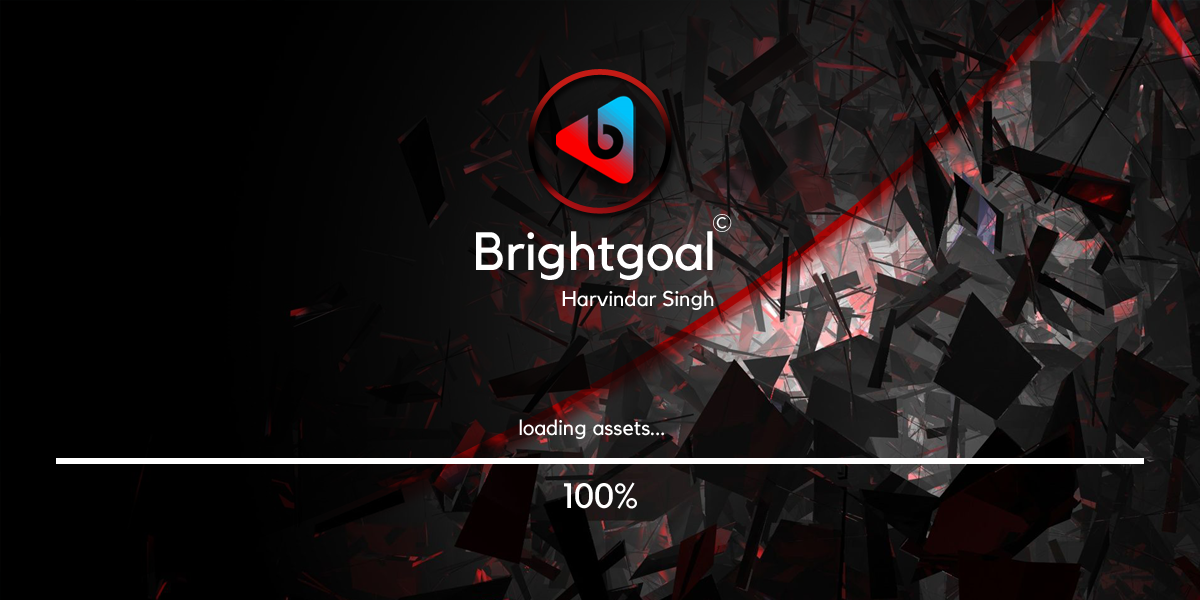
<style>
.page{position:relative;width:1200px;height:600px;background:#000000}
.page>*{position:absolute;margin:0}
.t1{font:15.4px "Kollektif";color:#ffffff}
.t2{font:53.3px "Kollektif";color:#ffffff}
.t3{font:21.3px "Kollektif";color:#ffffff}
.t4{font:34.7px "Kollektif";color:#ffffff}
</style>
<div class="page">
<p class="t1" style="left:716px;top:217px;width:11px;height:12px">C</p>
<p class="t2" style="left:476px;top:231px;width:237px;height:49px">Brightgoal</p>
<p class="t3" style="left:562px;top:290px;width:152px;height:20px">Harvindar Singh</p>
<p class="t3" style="left:519px;top:419px;width:145px;height:20px">loading assets...</p>
<p class="t4" style="left:564px;top:482px;width:73px;height:27px">100%</p>
</div>
